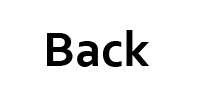
<style>
.page{position:relative;width:197px;height:100px;background:#ffffff}
.page>*{position:absolute;margin:0}
.t1{font:50.8px "Corbel-Bold";color:#000000}
</style>
<div class="page">
<p class="t1" style="left:47px;top:30px;width:102px;height:37px">Back</p>
</div>
